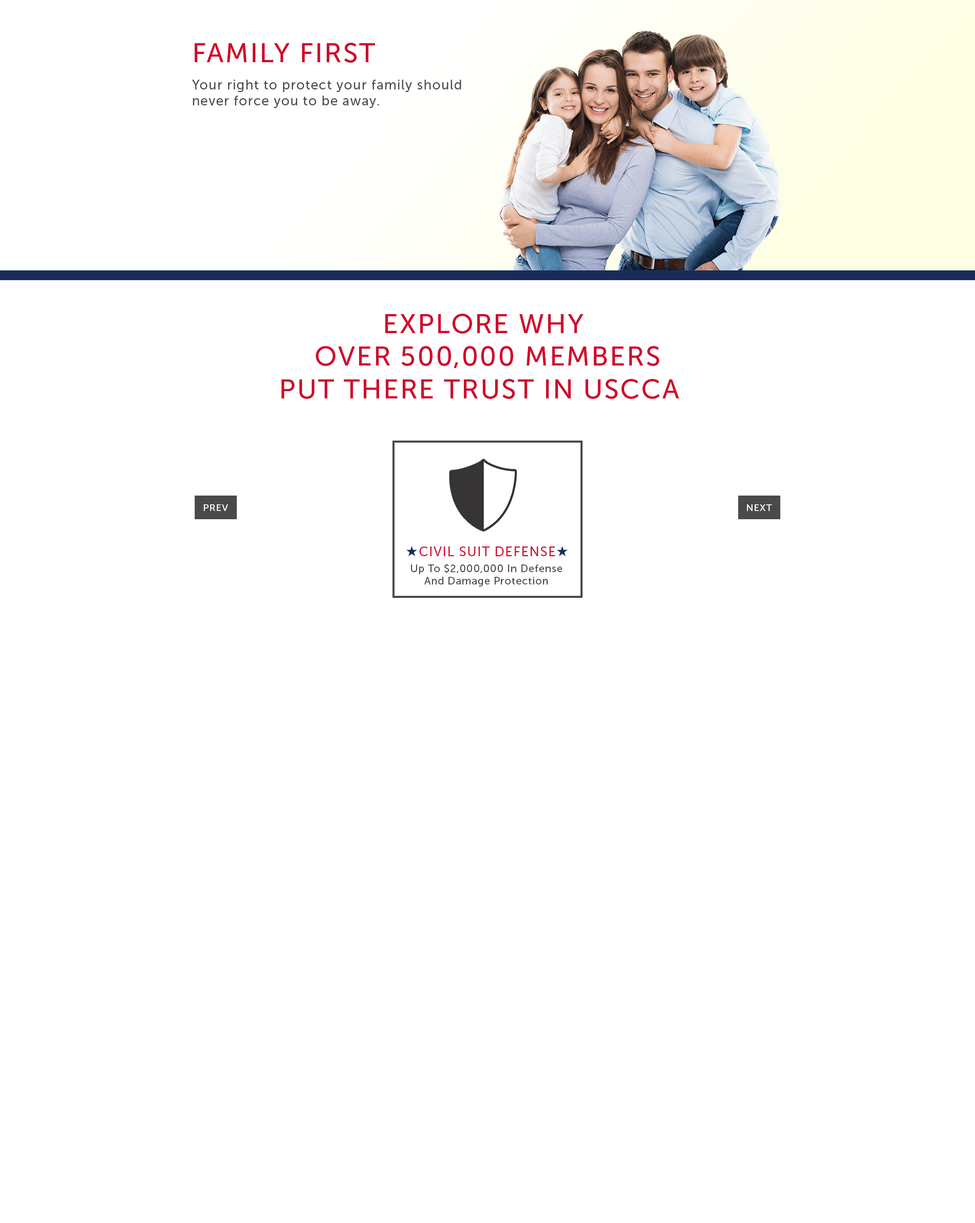
<style>
.page{position:relative;width:975px;height:1223px;background:#ffffff}
.page>*{position:absolute;margin:0}
.t1{font:27.2px "MuseoSans-500";letter-spacing:0.05em;color:#cf0a2c;text-transform:uppercase}
.t2{font:13.4px "MuseoSans-500";letter-spacing:0.05em;color:#4a4a4a}
.t3{font:9.4px "MuseoSans-500";letter-spacing:0.05em;color:#ffffff;text-transform:uppercase}
.t4{font:13.4px "MuseoSans-500";letter-spacing:0.05em;color:#cf0a2c;text-transform:uppercase}
.t5{font:10.3px "MuseoSans-500";letter-spacing:0.05em;color:#4a4a4a}
</style>
<div class="page">
<p class="t1" style="left:195px;top:43px;width:180px;height:20px">Family First</p>
<p class="t2" style="left:192px;top:80px;width:269px;height:28px">Your right to protect your family should never force you to be away.</p>
<p class="t1" style="left:282px;top:313px;width:397px;height:86px;text-align:center">Explore Why <br>Over 500,000 members<br>put there trust in USCCA</p>
<p class="t3" style="left:204px;top:504px;width:24px;height:7px">Prev</p>
<p class="t3" style="left:747px;top:504px;width:25px;height:7px">Next</p>
<p class="t4" style="left:419px;top:546px;width:137px;height:10px">Civil Suit Defense</p>
<p class="t5" style="left:411px;top:564px;width:152px;height:22px;text-align:center">Up To $2,000,000 In Defense And Damage Protection</p>
</div>
